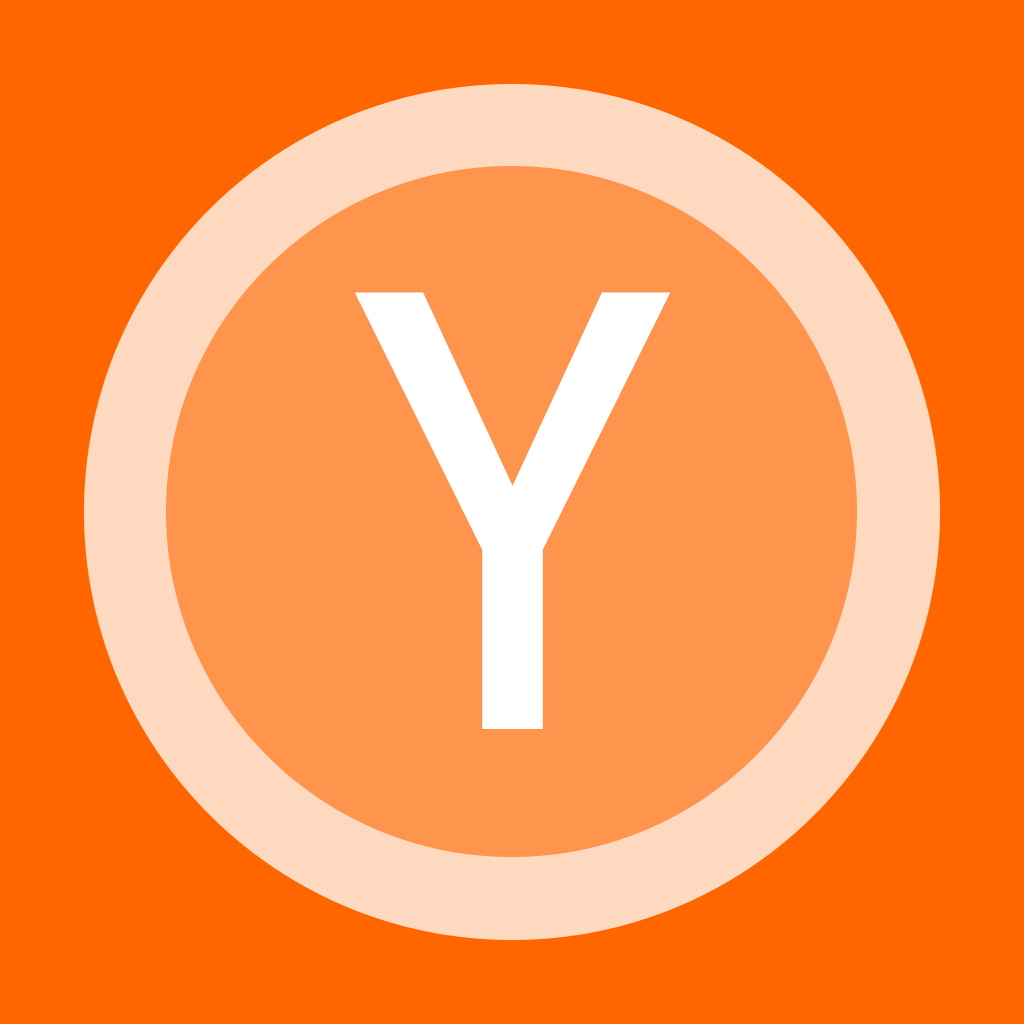
<style>
.page{position:relative;width:1024px;height:1024px;background:#ff6600}
.page>*{position:absolute;margin:0}
.t1{font:613.2px "DINAlternate-Bold";color:#ffffff}
</style>
<div class="page">
<p class="t1" style="left:355px;top:292px;width:316px;height:437px">Y</p>
</div>
